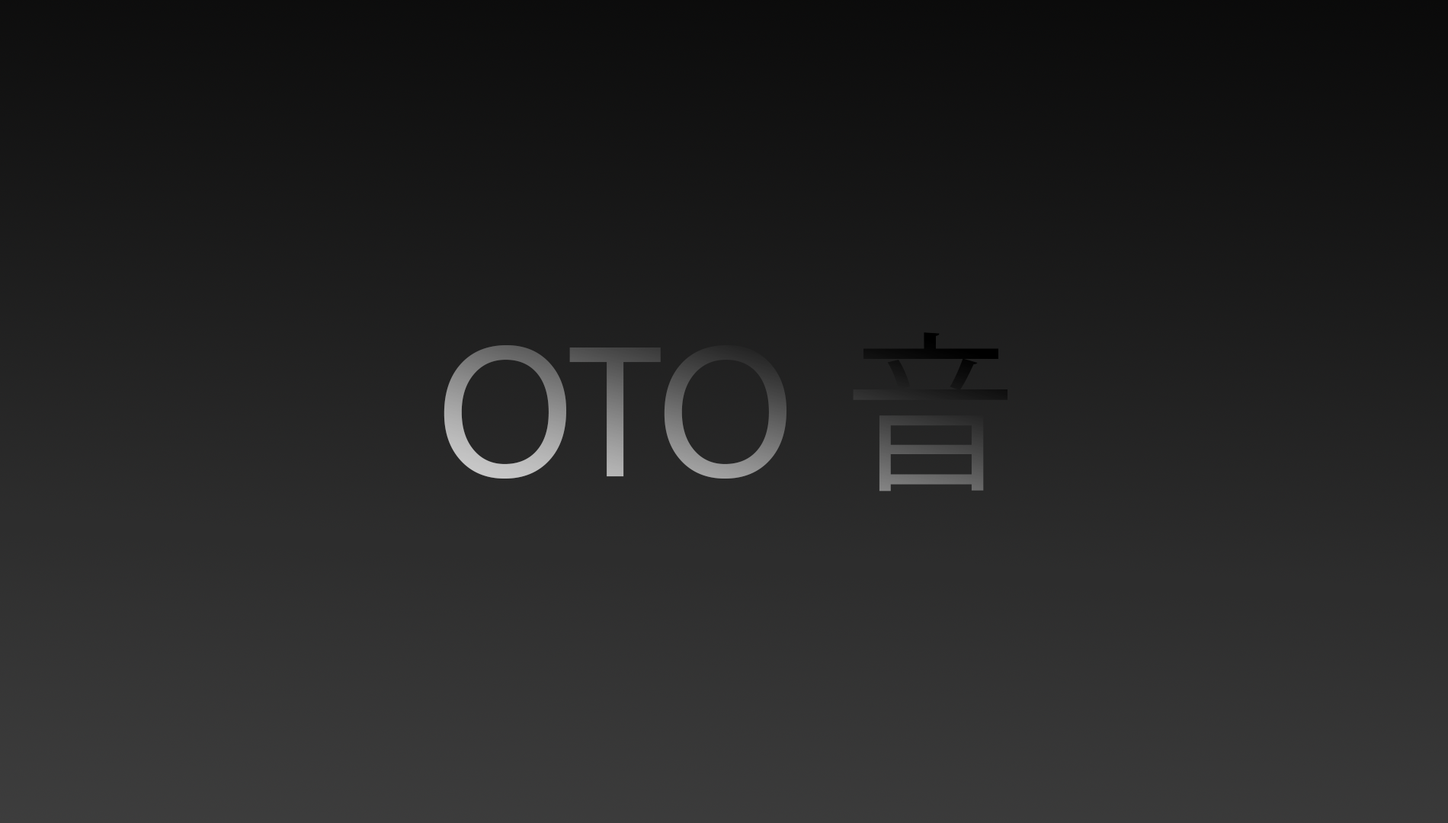
<style>
.page{position:relative;width:1448px;height:823px}
.page>*{position:absolute;margin:0}
.t1{font:170.3px "MicrosoftYaHei"}
.t2{font:170.3px "KozGoPr6N-Regular"}
</style>
<div class="page">
<p class="t1" style="left:444px;top:332px;width:564px;height:160px">OTO <span class="t2">音</span></p>
</div>
